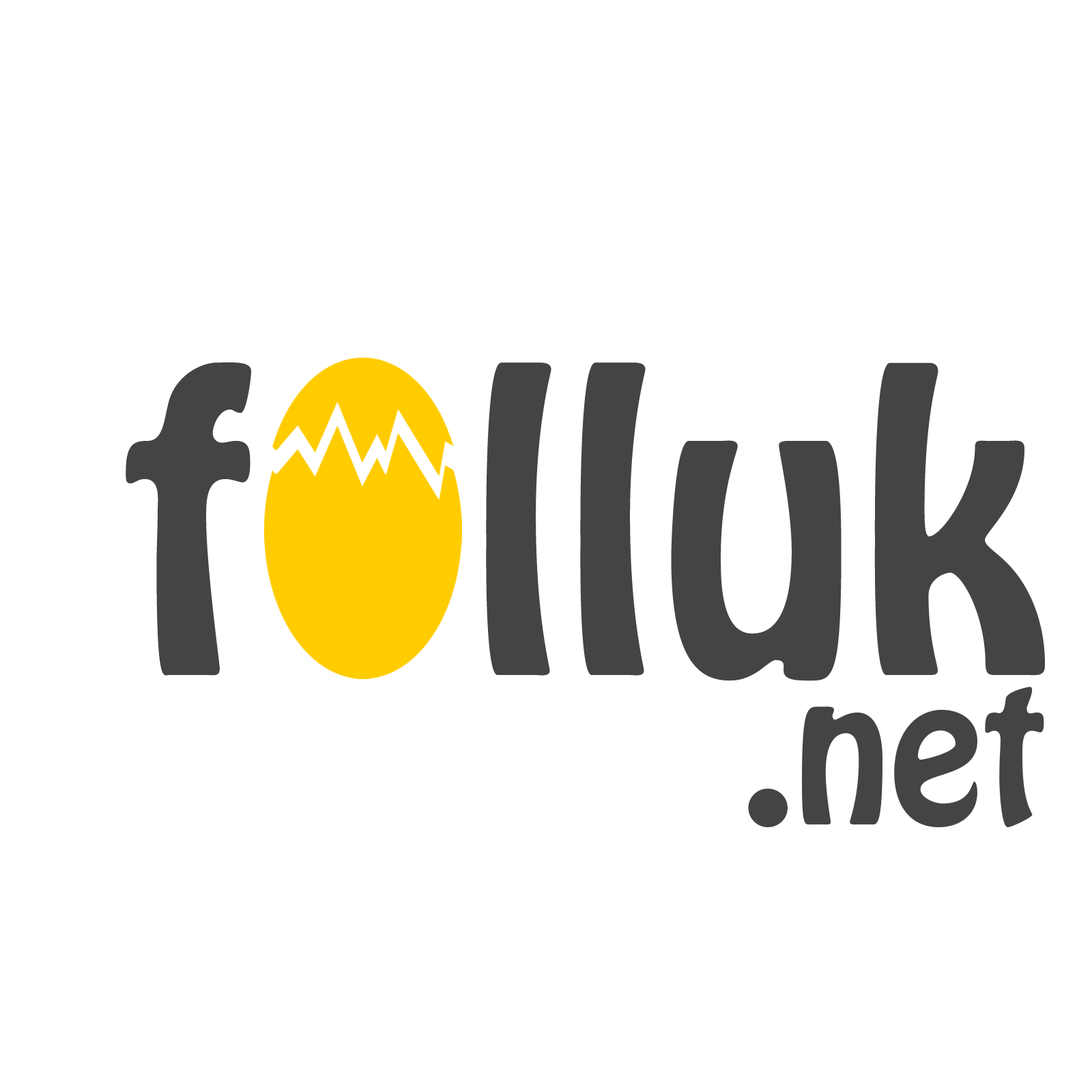
<style>
.page{position:relative;width:1092px;height:1092px;background:#ffffff}
.page>*{position:absolute;margin:0}
.t1{font:366.1px "HoboStd";color:#444444}
.t2{font:175.2px "HoboStd";color:#444444}
</style>
<div class="page">
<p class="t1" style="left:126px;top:362px;width:919px;height:319px">f  lluk</p>
<p class="t2" style="left:748px;top:687px;width:296px;height:141px">.net</p>
</div>
